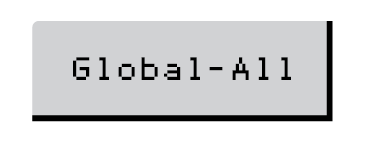
<style>
.page{position:relative;width:375px;height:142px;background:#d1d2d4}
.page>*{position:absolute;margin:0}
.t1{font:26px "Mono0756";color:#000000}
</style>
<div class="page">
<p class="t1" style="left:73px;top:57px;width:218px;height:23px">Global-All</p>
</div>
